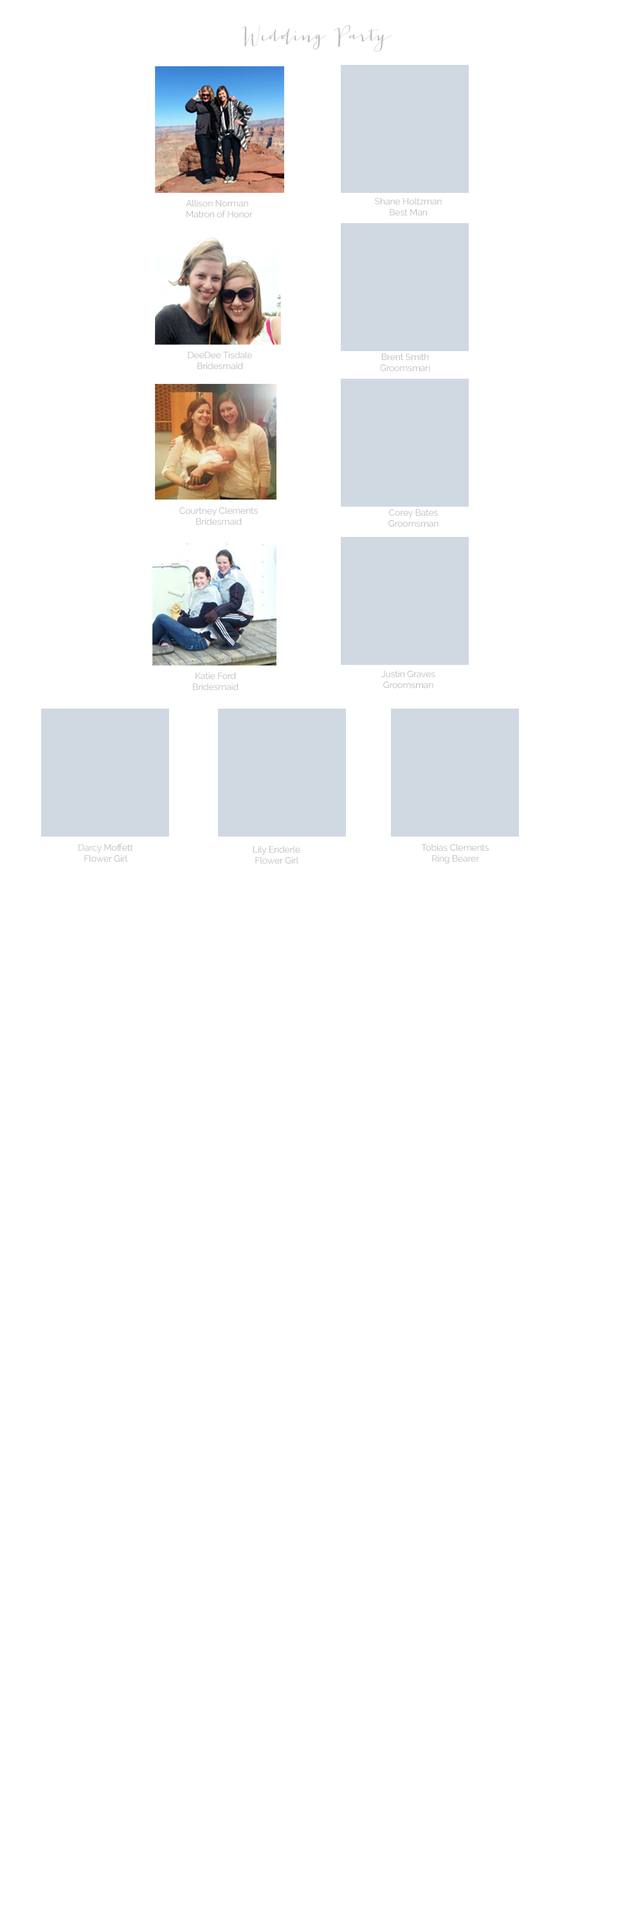
<style>
.page{position:relative;width:643px;height:1929px;background:#ffffff}
.page>*{position:absolute;margin:0}
.t1{font:19.3px "JacquesGilles";letter-spacing:-0.01em;color:#bab7b7}
.t2{font:9px "Raleway-Regular";letter-spacing:-0.01em;color:#bab7b7}
</style>
<div class="page">
<p class="t1" style="left:241px;top:25px;width:151px;height:26px">Wedding Party</p>
<p class="t2" style="left:375px;top:197px;width:67px;height:19px;text-align:center">Shane Holtzman<br>Best Man</p>
<p class="t2" style="left:186px;top:199px;width:67px;height:19px">Allison Norman<br>Matron of Honor</p>
<p class="t2" style="left:188px;top:351px;width:64px;height:19px;text-align:center">DeeDee Tisdale<br>Bridesmaid</p>
<p class="t2" style="left:380px;top:353px;width:50px;height:19px;text-align:center">Brent Smith<br>Groomsman</p>
<p class="t2" style="left:179px;top:507px;width:79px;height:18px;text-align:center">Courtney Clements<br>Bridesmaid</p>
<p class="t2" style="left:388px;top:509px;width:50px;height:18px;text-align:center">Corey Bates<br>Groomsman</p>
<p class="t2" style="left:193px;top:672px;width:46px;height:18px;text-align:center">Katie Ford<br>Bridesmaid</p>
<p class="t2" style="left:381px;top:670px;width:54px;height:18px;text-align:center">Justin Graves<br>Groomsman</p>
<p class="t2" style="left:78px;top:843px;width:55px;height:19px;text-align:center">Darcy Moffett<br>Flower Girl</p>
<p class="t2" style="left:253px;top:845px;width:47px;height:19px;text-align:center">Lily Enderle<br>Flower Girl</p>
<p class="t2" style="left:421px;top:843px;width:68px;height:21px;text-align:center">Tobias Clements<br>Ring Bearer</p>
</div>
